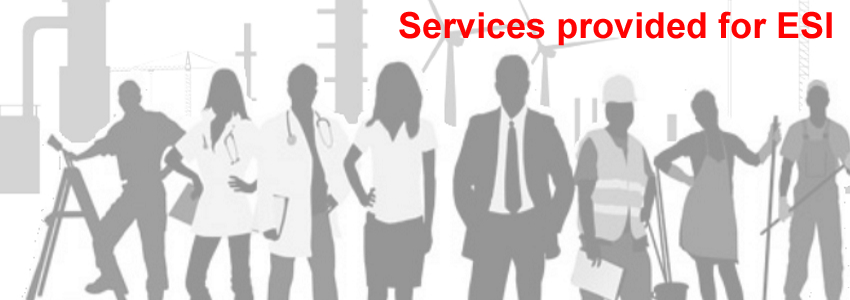
<style>
.page{position:relative;width:850px;height:300px;background:#ffffff}
.page>*{position:absolute;margin:0}
.t1{font:36px "Arial-BoldMT";color:#fe0303}
</style>
<div class="page">
<p class="t1" style="left:399px;top:11px;width:433px;height:35px">Services provided for ESI</p>
</div>
